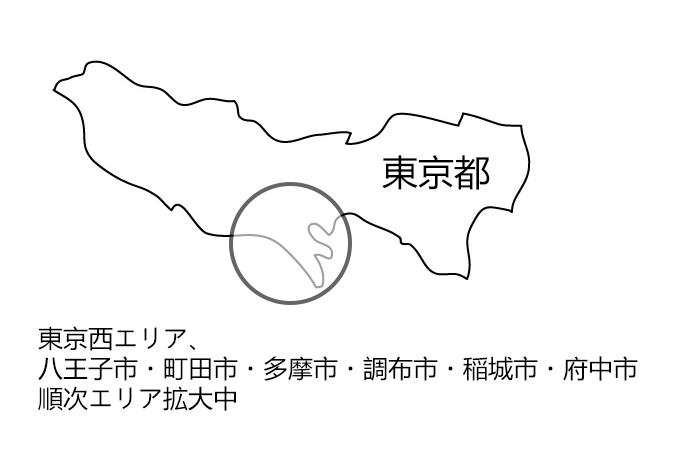
<style>
.page{position:relative;width:700px;height:450px;background:#ffffff}
.page>*{position:absolute;margin:0}
.t1{font:25px "MicrosoftYaHeiUI";color:#000000}
</style>
<div class="page">
<p class="t1" style="left:38px;top:326px;width:600px;height:85px">東京西エリア、<br>八王子市・町田市・多摩市・調布市・稲城市・府中市<br>順次エリア拡大中</p>
</div>
